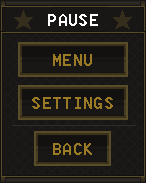
<style>
.page{position:relative;width:146px;height:183px;background:#181716}
.page>*{position:absolute;margin:0}
.t1{font:30px "Terminal";letter-spacing:0.01em;color:#ffffff}
.t2{font:30px "Terminal";letter-spacing:0.01em;color:#9a7a25}
</style>
<div class="page">
<p class="t1" style="left:48px;top:14px;width:50px;height:12px">PAUSE</p>
<p class="t2" style="left:53px;top:54px;width:39px;height:12px">MENU</p>
<p class="t2" style="left:32px;top:97px;width:81px;height:12px">SETTINGS</p>
<p class="t2" style="left:53px;top:143px;width:39px;height:12px">BACK</p>
</div>
